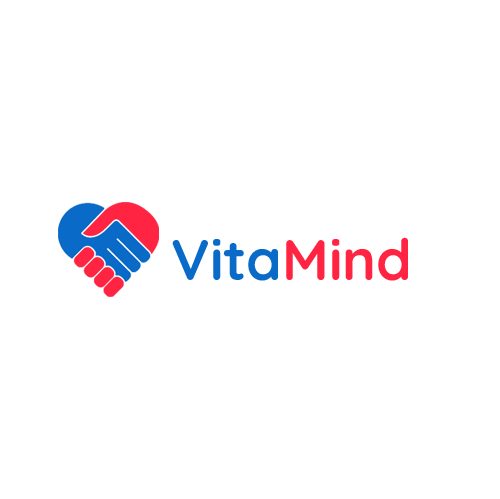
<style>
.page{position:relative;width:500px;height:499px;background:#ffffff}
.page>*{position:absolute;margin:0}
.t1{font:57px "Quicksand-Bold";color:#0a6ac7}
.t2{font:57px "Quicksand-Bold";color:#ff2442}
</style>
<div class="page">
<p class="t1" style="left:172px;top:237px;width:236px;height:44px">Vita<span class="t2">Mind</span></p>
</div>
